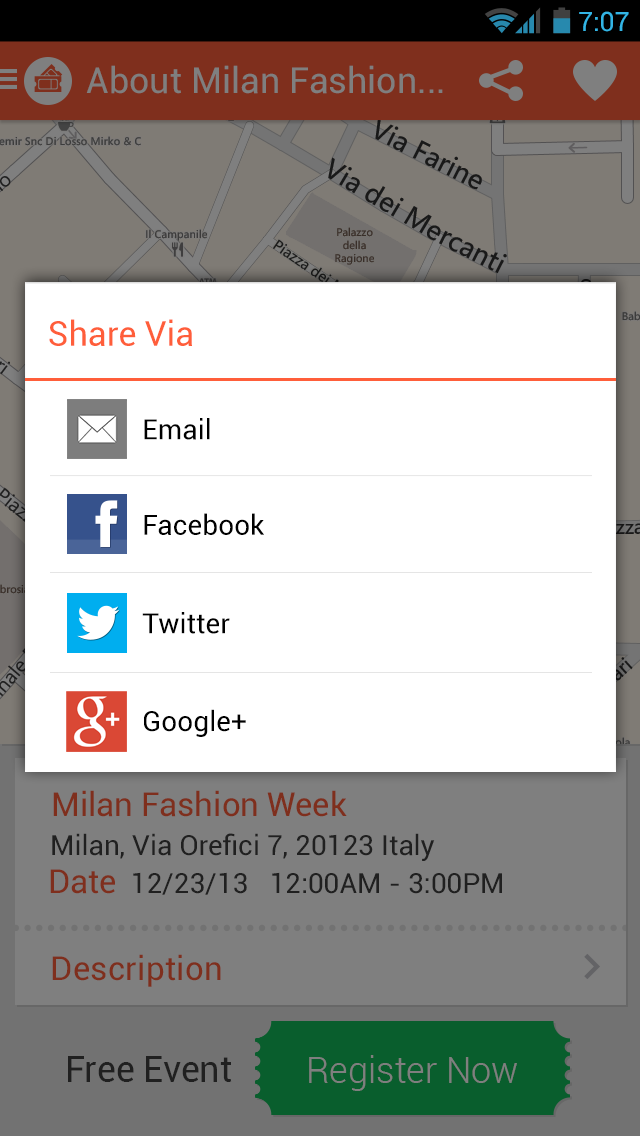
<style>
.page{position:relative;width:640px;height:1136px;background:#ffffff}
.page>*{position:absolute;margin:0}
.t1{font:26.6px "Roboto-Regular";color:#33b5e5}
.t2{font:35.8px "Roboto-Regular";color:#7f7f7f}
.t3{font:34.3px "Roboto-Regular";color:#ff5e3a}
.t4{font:28.1px "Roboto-Regular";color:#000000}
.t5{font:33px "Roboto-Regular";color:#7f2f1d}
.t6{font:28px "Roboto-Regular";color:#202020}
.t7{font:33px "Roboto-Regular";color:#202020}
.t8{font:33px "Roboto-Regular";letter-spacing:0.01em;color:#7f2f1d}
.t9{font:36px "Roboto-Regular";color:#202020}
.t10{font:36px "Roboto-Light";color:#7f7f7f}
</style>
<div class="page">
<p class="t1" style="left:579px;top:11px;width:50px;height:21px">7:07</p>
<p class="t2" style="left:86px;top:65px;width:357px;height:29px">About Milan Fashion...</p>
<p class="t3" style="left:49px;top:319px;width:143px;height:27px">Share Via</p>
<p class="t4" style="left:144px;top:418px;width:66px;height:22px">Email</p>
<p class="t4" style="left:144px;top:513px;width:120px;height:22px">Facebook</p>
<p class="t4" style="left:142px;top:612px;width:88px;height:22px">Twitter</p>
<p class="t4" style="left:144px;top:709px;width:102px;height:28px">Google+</p>
<p class="t5" style="left:53px;top:790px;width:294px;height:27px">Milan Fashion Week</p>
<p class="t6" style="left:52px;top:833px;width:383px;height:28px">Milan, Via Orefici 7, 20123 Italy</p>
<p class="t6" style="left:50px;top:869px;width:452px;height:26px"><span class="t7">Date  </span>12/23/13   12:00AM - 3:00PM</p>
<p class="t8" style="left:52px;top:954px;width:169px;height:33px">Description</p>
<p class="t9" style="left:68px;top:1056px;width:164px;height:26px">Free Event</p>
<p class="t10" style="left:309px;top:1055px;width:208px;height:36px">Register Now</p>
</div>
